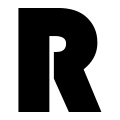
<style>
.page{position:relative;width:120px;height:120px;background:#ffffff}
.page>*{position:absolute;margin:0}
.t1{font:156.2px "Bauhaus93";color:#000000}
</style>
<div class="page">
<p class="t1" style="left:18px;top:8px;width:84px;height:104px">R</p>
</div>
